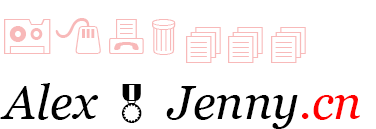
<style>
.page{position:relative;width:376px;height:129px;background:#ffffff}
.page>*{position:absolute;margin:0}
.t1{font:48px "Georgia-Italic";color:#000000}
.t2{font:48px "Webdings";color:#000000}
.t3{font:48px "Georgia-Italic";color:#ff0000}
</style>
<div class="page">
<p class="t1" style="left:0px;top:83px;width:360px;height:46px">Alex <span class="t2">&amp;</span> Jenny<span class="t3">.cn</span></p>
</div>
